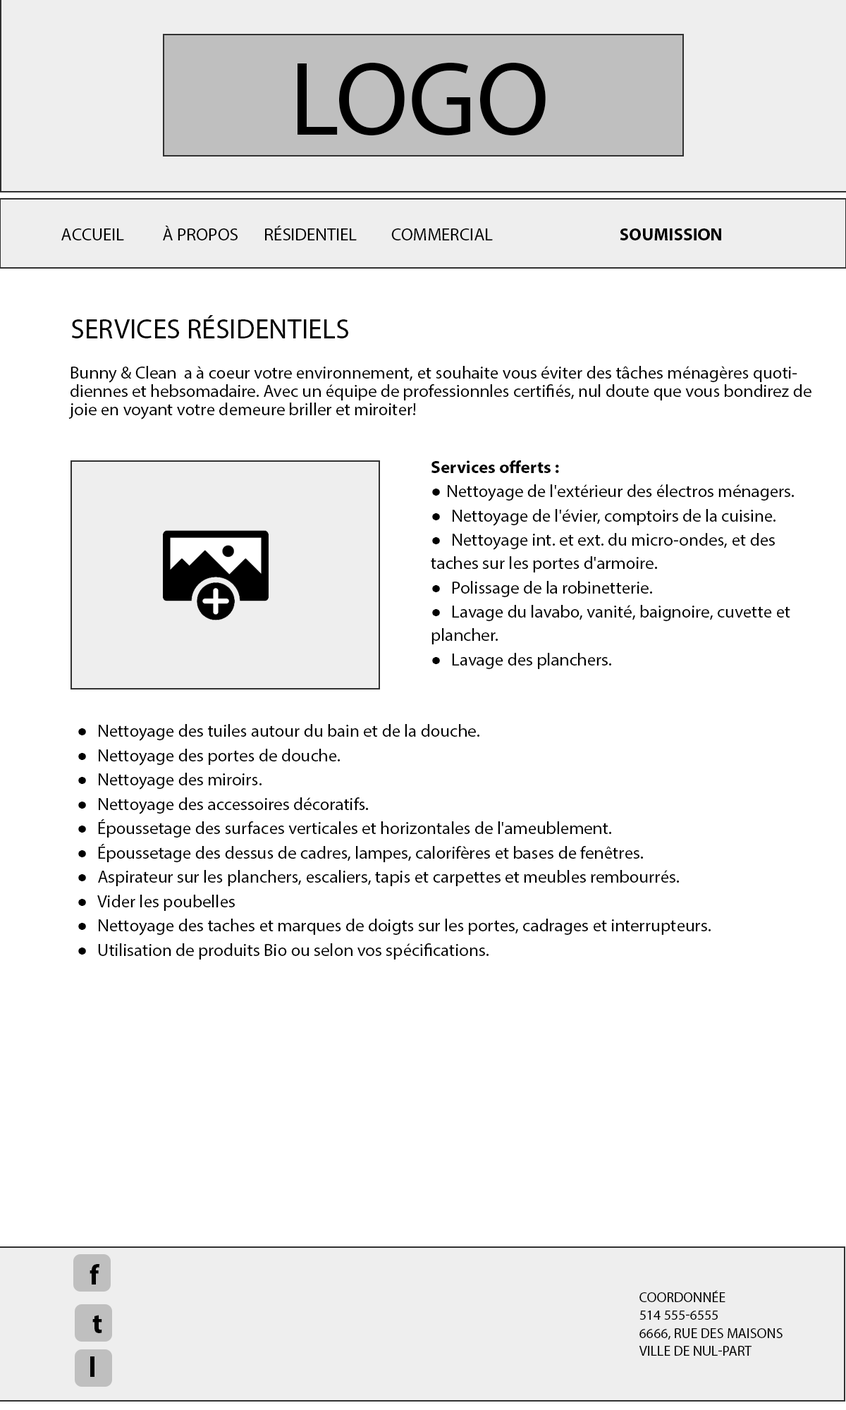
<style>
.page{position:relative;width:846px;height:1410px;background:#ffffff}
.page>*{position:absolute;margin:0}
.t1{font:105.7px "MyriadPro-Regular";color:#000000;text-transform:uppercase}
.t2{font:17.6px "MyriadPro-Regular";color:#000000;text-transform:uppercase}
.t3{font:17.6px "MyriadPro-Bold";color:#000000;text-transform:uppercase}
.t4{font:28.2px "MyriadPro-Regular";color:#000000;text-transform:uppercase}
.t5{font:17.6px/18.3px "MyriadPro-Regular";color:#000000}
.t6{font:17.6px/23.3px "MyriadPro-Regular";color:#000000}
.t7{font:17.6px/23.3px "MyriadPro-Bold";color:#000000}
.t8{font:17.6px/23.3px "Helvetica";color:#000000}
.t9{font:28.2px "MyriadPro-Bold";color:#000000}
.t10{font:14.1px "MyriadPro-Regular";color:#000000;text-transform:uppercase}
</style>
<div class="page">
<p class="t1" style="left:297px;top:62px;width:249px;height:74px">logo</p>
<p class="t2" style="left:61px;top:226px;width:660px;height:14px">accueil  à propos  résidentiel  commercial     <span class="t3">soumission</span></p>
<p class="t4" style="left:72px;top:315px;width:276px;height:23px">Services résidentiels</p>
<p class="t5" style="left:68px;top:366px;width:743px;height:53px">Bunny &amp; Clean  a à coeur votre environnement, et souhaite vous éviter des tâches ménagères quotidiennes et hebsomadaire. Avec un équipe de professionnles certifiés, nul doute que vous bondirez de joie en voyant votre demeure briller et miroiter!</p>
<p class="t6" style="left:431px;top:460px;width:363px;height:209px"><span class="t7">Services offerts : <br></span><span class="t8">● </span>Nettoyage de l'extérieur des électros ménagers.<br><span class="t8">●  </span>Nettoyage de l'évier, comptoirs de la cuisine.  <br><span class="t8">●  </span>Nettoyage int. et ext. du micro-ondes, et des taches sur les portes d'armoire.<br><span class="t8">●  </span>Polissage de la robinetterie.<br><span class="t8">●  </span>Lavage du lavabo, vanité, baignoire, cuvette et plancher. <br><span class="t8">●  </span>Lavage des planchers.</p>
<p class="t6" style="left:78px;top:724px;width:633px;height:235px"><span class="t8">●  </span>Nettoyage des tuiles autour du bain et de la douche. <br><span class="t8">●  </span>Nettoyage des portes de douche.<br><span class="t8">●  </span>Nettoyage des miroirs.<br><span class="t8">●  </span>Nettoyage des accessoires décoratifs.<br><span class="t8">●  </span>Époussetage des surfaces verticales et horizontales de l'ameublement.<br><span class="t8">●  </span>Époussetage des dessus de cadres, lampes, calorifères et bases de fenêtres.<br><span class="t8">●  </span>Aspirateur sur les planchers, escaliers, tapis et carpettes et meubles rembourrés. <br><span class="t8">●  </span>Vider les poubelles<br><span class="t8">●  </span>Nettoyage des taches et marques de doigts sur les portes, cadrages et interrupteurs.<br><span class="t8">●  </span>Utilisation de produits Bio ou selon vos spécifications.</p>
<p class="t9" style="left:90px;top:1264px;width:9px;height:20px">f</p>
<p class="t10" style="left:639px;top:1290px;width:143px;height:65px">coordonnée<br>514 555-6555<br>6666, rUE DES MAISONS<br>VILLE DE NUL-PART</p>
<p class="t9" style="left:92px;top:1315px;width:10px;height:18px">t</p>
</div>
